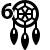
<style>
.page{position:relative;width:50px;height:50px;background:#ffffff}
.page>*{position:absolute;margin:0}
.t1{font:24px "MyriadHebrew-Bold";color:#000000}
</style>
<div class="page">
<p class="t1" style="left:1px;top:3px;width:12px;height:16px">6</p>
</div>
